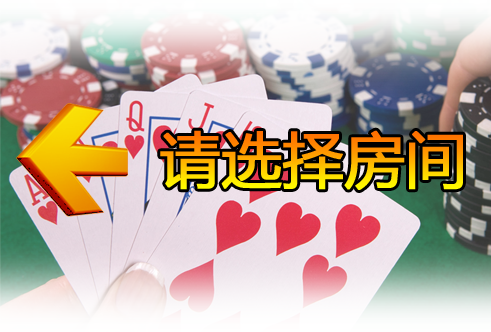
<style>
.page{position:relative;width:491px;height:332px}
.page>*{position:absolute;margin:0}
.t1{font:60px "MicrosoftYaHei";font-weight:bold}
</style>
<div class="page">
<p class="t1" style="left:160px;top:130px;width:303px;height:60px">请选择房间</p>
</div>
